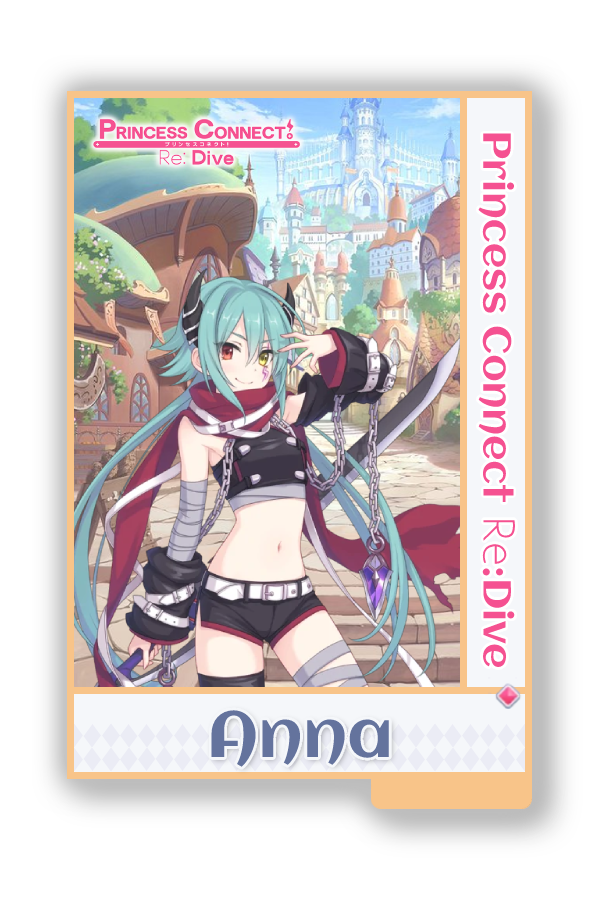
<style>
.page{position:relative;width:600px;height:900px;background:#ffffff}
.page>*{position:absolute;margin:0}
.t1{font:39px "Aclonica-Regular";color:#f55191}
.t2{font:39px "AaarghNormal";color:#f55191}
.t3{font:65px "Aclonica-Regular";color:#64739d}
</style>
<div class="page">
<p class="t1" style="left:478px;top:133px;width:38px;height:534px;rotate:90deg">Princess Connect <span class="t2">Re</span>:Dive</p>
<p class="t3" style="left:211px;top:710px;width:178px;height:57px">Anna</p>
</div>
